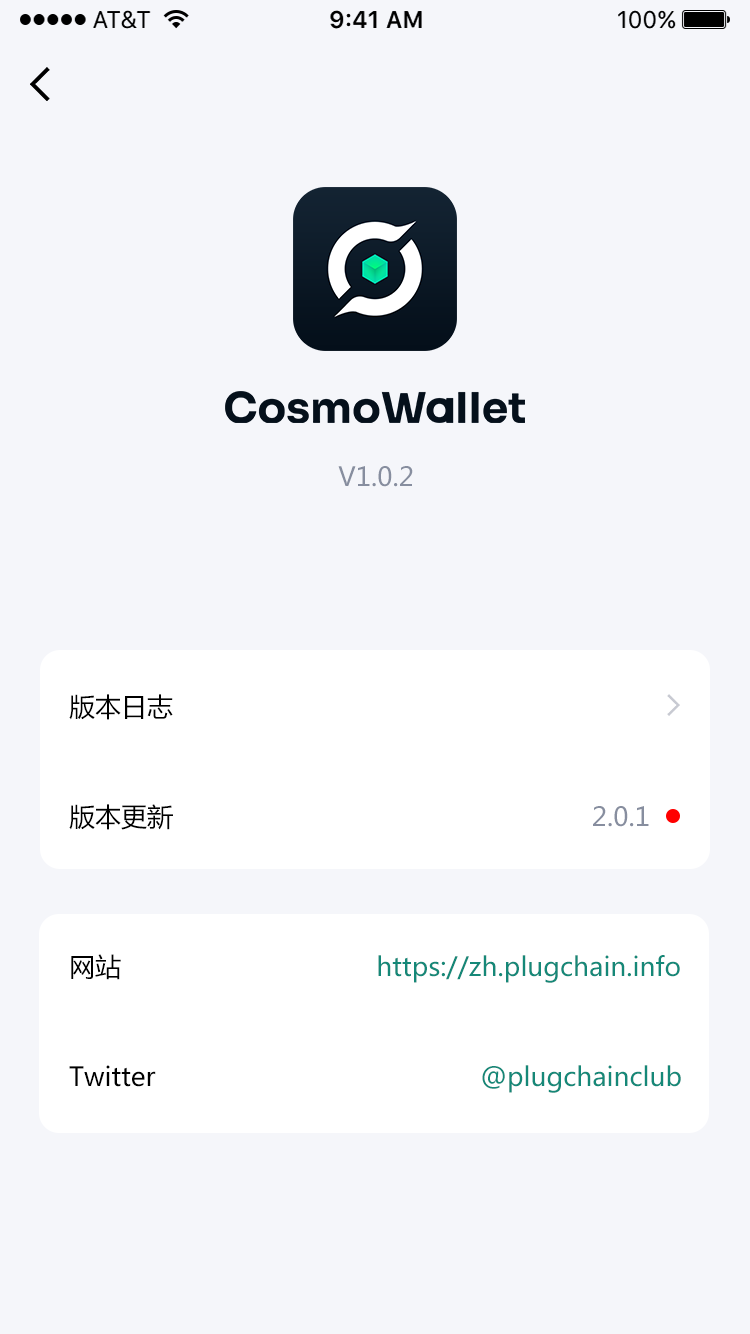
<style>
.page{position:relative;width:750px;height:1334px;background:#f5f6fa}
.page>*{position:absolute;margin:0}
.t1{font:26px "MicrosoftYaHei";color:#878e9f}
.t2{font:26px "MicrosoftYaHei";color:#000000}
.t3{font:26px "MicrosoftYaHei";color:#158878}
</style>
<div class="page">
<p class="t1" style="left:338px;top:466px;width:75px;height:21px">V1.0.2</p>
<p class="t2" style="left:69px;top:694px;width:104px;height:26px">版本日志</p>
<p class="t2" style="left:69px;top:804px;width:104px;height:26px">版本更新</p>
<p class="t1" style="left:593px;top:806px;width:56px;height:21px">2.0.1</p>
<p class="t2" style="left:71px;top:954px;width:50px;height:26px">网站</p>
<p class="t3" style="left:378px;top:955px;width:302px;height:28px">https://zh.plugchain.info</p>
<p class="t2" style="left:69px;top:1065px;width:87px;height:22px">Twitter</p>
<p class="t3" style="left:482px;top:1065px;width:199px;height:28px">@plugchainclub</p>
</div>
